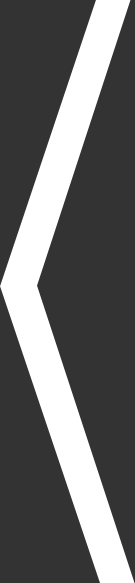
<style>
.page{position:relative;width:135px;height:583px;background:#333333}
.page>*{position:absolute;margin:0}
.t1{font:625px "NanumBarunGothicOTF";color:#ffffff;scale:0.66 1}
</style>
<div class="page">
<p class="t1" style="left:0px;top:0px;width:135px;height:584px">&lt;</p>
</div>
